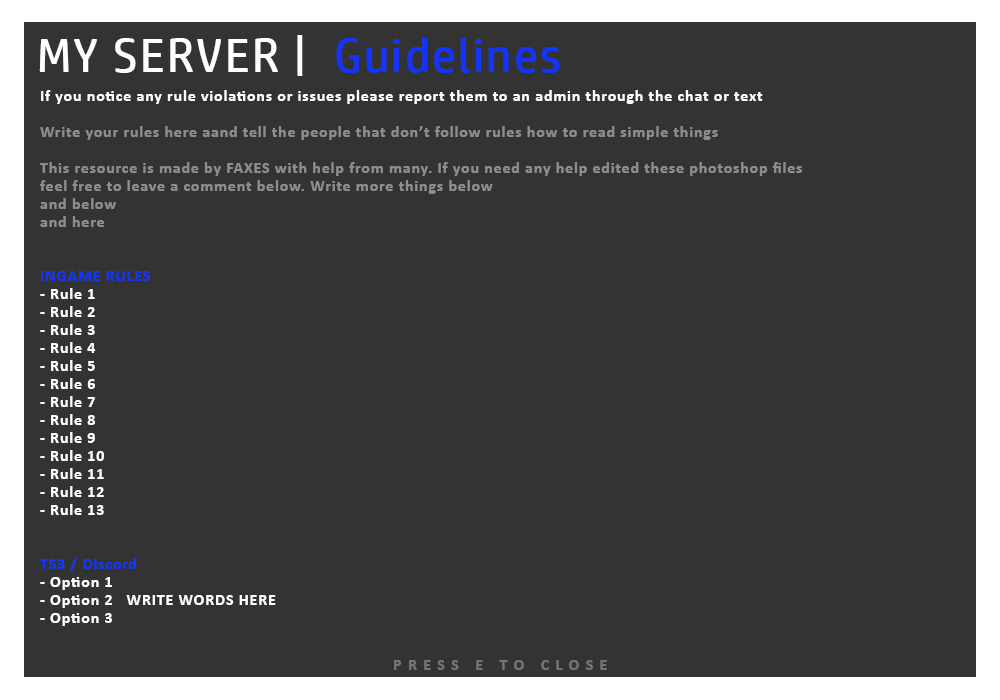
<style>
.page{position:relative;width:1000px;height:700px;background:#333333}
.page>*{position:absolute;margin:0}
.t1{font:48px "HPSimplifiedME-Regular";letter-spacing:0.05em;color:#ffffff}
.t2{font:48px "HPSimplifiedME-Regular";letter-spacing:0.05em;color:#1334ff}
.t3{font:16px/18px "Calibri-Bold";letter-spacing:0.05em;color:#8d8d8d}
.t4{font:16px/18px "Calibri-Bold";letter-spacing:0.05em;color:#ffffff}
.t5{font:16px/18px "Calibri-Bold";letter-spacing:0.05em;color:#1334ff}
.t6{font:16px "Calibri-Bold";letter-spacing:0.4em;color:#747474}
</style>
<div class="page">
<p class="t1" style="left:39px;top:35px;width:521px;height:41px">MY SERVER |  <span class="t2">Guidelines</span></p>
<p class="t3" style="left:40px;top:90px;width:762px;height:536px"><span class="t4">If you notice any rule violations or issues please report them to an admin through the chat or text<br></span><br>Write your rules here aand tell the people that don’t follow rules how to read simple things<br><br>This resource is made by FAXES with help from many. If you need any help edited these photoshop files <br>feel free to leave a comment below. Write more things below<br>and below<br>and here<br><br><br><span class="t5">INGAME RULES<br></span><span class="t4">- Rule 1<br>- Rule 2 <br>- Rule 3<br>- Rule 4<br>- Rule 5<br>- Rule 6<br>- Rule 7<br>- Rule 8<br>- Rule 9<br>- Rule 10<br>- Rule 11<br>- Rule 12<br>- Rule 13<br><br><br></span><span class="t5">TS3 / Discord<br></span><span class="t4">- Option 1<br>- Option 2   WRITE WORDS HERE<br>- Option 3</span></p>
<p class="t6" style="left:394px;top:660px;width:213px;height:10px">PRESS E TO CLOSE</p>
</div>
